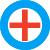
<style>
.page{position:relative;width:50px;height:50px;background:#ffffff}
.page>*{position:absolute;margin:0}
.t1{font:59.5px "MyriadPro-Bold";color:#ef3f2a}
</style>
<div class="page">
<p class="t1" style="left:9px;top:9px;width:32px;height:32px">+</p>
</div>
